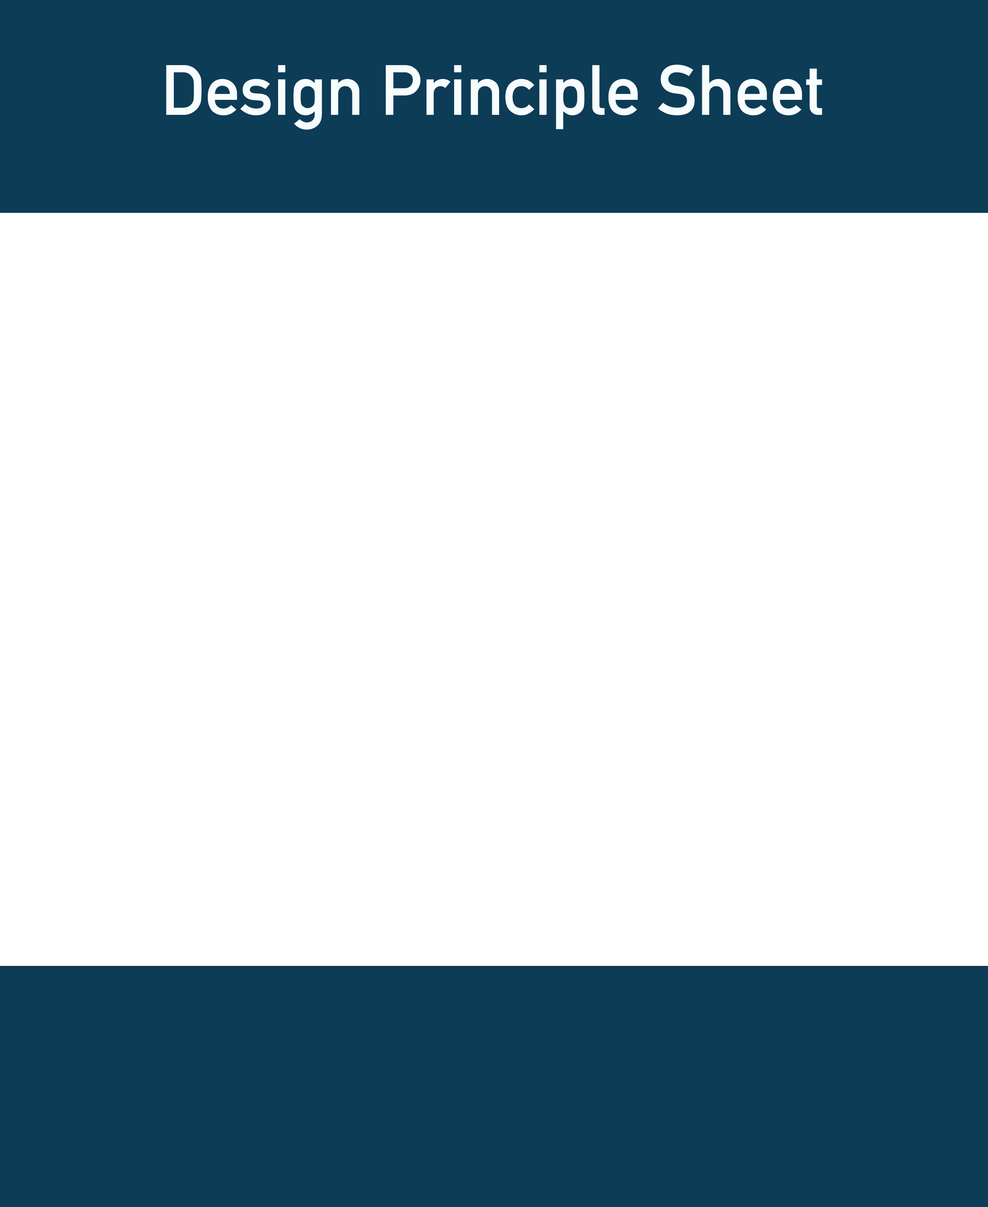
<style>
.page{position:relative;width:988px;height:1207px;background:#ffffff}
.page>*{position:absolute;margin:0}
.t1{font:69.9px "DINAlternate-Bold";color:#f7fcfc}
</style>
<div class="page">
<p class="t1" style="left:166px;top:64px;width:656px;height:66px">Design Principle Sheet</p>
</div>
